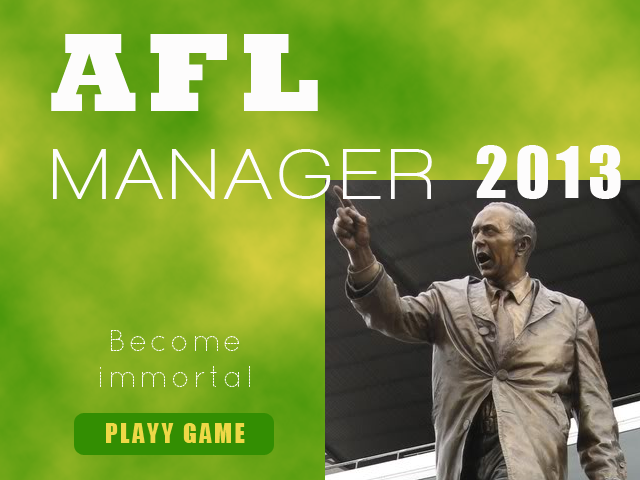
<style>
.page{position:relative;width:640px;height:480px}
.page>*{position:absolute;margin:0}
.t1{font:72px "WalkwayBold";letter-spacing:0.1em;color:#fdfcfc}
.t2{font:114px "Rockwell-ExtraBold";letter-spacing:0.1em;color:#fdfcfc}
.t3{font:66px "Impact";letter-spacing:0.1em;color:#fdfcfc}
.t4{font:30px "QuicksandDash-Regular";letter-spacing:0.1em;color:#fdfcfc}
.t5{font:25px "Impact";letter-spacing:0.1em;color:#eed847}
</style>
<div class="page">
<p class="t1" style="left:51px;top:34px;width:381px;height:165px"><span class="t2">AFL<br></span>MANAGER</p>
<p class="t3" style="left:476px;top:145px;width:145px;height:54px">2013</p>
<p class="t4" style="left:100px;top:330px;width:150px;height:57px;text-align:center">Become<br>immortal</p>
<p class="t5" style="left:106px;top:423px;width:139px;height:20px">PLAYY GAME</p>
</div>
